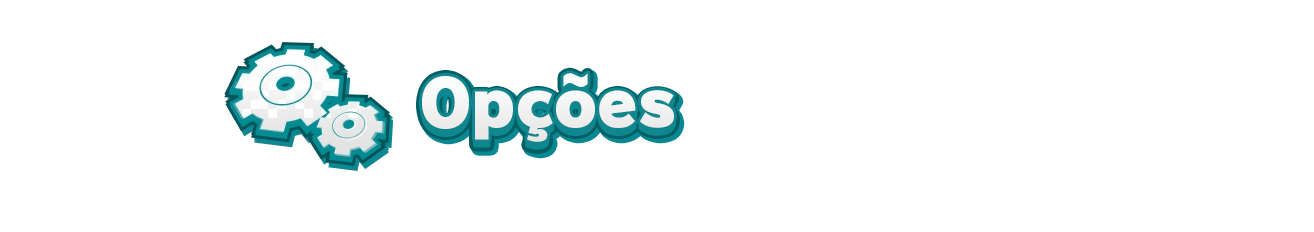
<style>
.page{position:relative;width:1314px;height:232px;background:#ffffff}
.page>*{position:absolute;margin:0}
.t1{font:69.5px "RodinPro-UB";color:#f0f0f1;scale:0.92 1}
.t2{font:64px "RodinPro-UB";color:#f2f2f3}
</style>
<div class="page">
<p class="t1" style="left:422px;top:73px;width:252px;height:75px">Opções</p>
<p class="t2" style="left:422px;top:73px;width:252px;height:69px">Opções</p>
</div>
